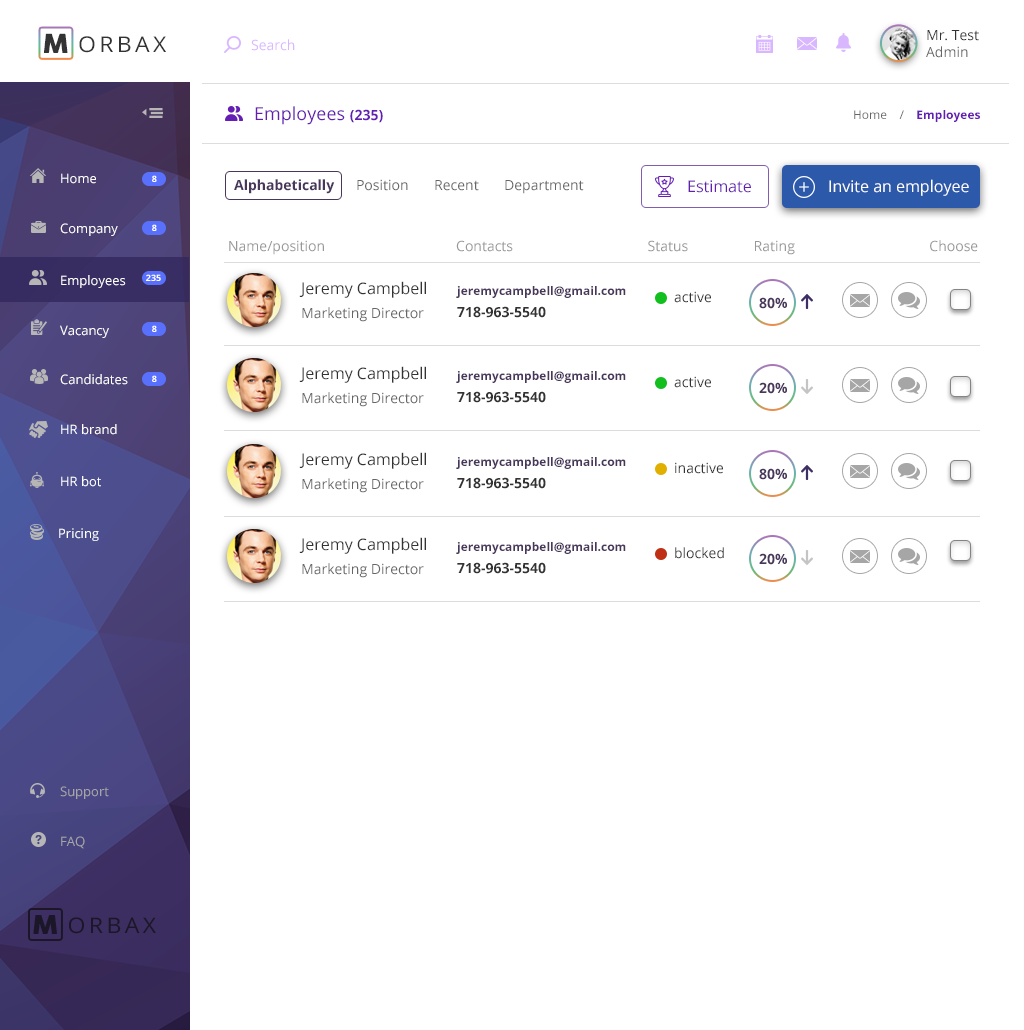
<style>
.page{position:relative;width:1024px;height:1030px;background:#ffffff}
.page>*{position:absolute;margin:0}
.t1{font:14px "OpenSans";color:#333333}
.t2{font:14px "OpenSans";color:#666666}
.t3{font:26.1px "COCOGOOSE";letter-spacing:0.15em;color:#333333;text-transform:uppercase;scale:1.05 1}
.t4{font:21.8px "OpenSans";letter-spacing:0.15em;color:#333333;text-transform:uppercase;scale:1.05 1}
.t5{font:14px "OpenSans";color:#d9b7ff}
.t6{font:18px "OpenSans";color:#641eb4}
.t7{font:14px "OpenSans-Bold";color:#641eb4}
.t8{font:12px "OpenSans";color:#666666}
.t9{font:12px "OpenSans-Bold";color:#641eb4}
.t10{font:13px "OpenSans";color:#ffffff}
.t11{font:8.8px "OpenSans-Bold";color:#ffffff}
.t12{font:14px "OpenSans-Bold";color:#48365b}
.t13{font:16px "OpenSans";color:#641eb4}
.t14{font:16px "OpenSans";color:#ffffff}
.t15{font:14px "OpenSans";color:#989898}
.t16{font:16px "OpenSans";color:#333333}
.t17{font:12px "OpenSans-Bold";color:#48365b}
.t18{font:14px "OpenSans-Bold";color:#333333}
.t19{font:13px "OpenSans";color:#a6a6a6}
.t20{font:25.8px "COCOGOOSE";letter-spacing:0.15em;color:#1c1728;text-transform:uppercase;scale:1.07 1}
.t21{font:21.5px "OpenSans";letter-spacing:0.15em;color:#1c1728;text-transform:uppercase;scale:1.07 1}
</style>
<div class="page">
<p class="t1" style="left:926px;top:30px;width:53px;height:28px">Mr. Test<br><span class="t2">Admin</span></p>
<p class="t3" style="left:44px;top:33px;width:24px;height:20px">M</p>
<p class="t4" style="left:79px;top:36px;width:87px;height:17px">orbax</p>
<p class="t5" style="left:251px;top:39px;width:44px;height:12px">Search</p>
<p class="t6" style="left:255px;top:106px;width:128px;height:19px">Employees <span class="t7">(235)</span></p>
<p class="t8" style="left:854px;top:110px;width:126px;height:12px">Home    /    <span class="t9">Employees</span></p>
<p class="t10" style="left:61px;top:173px;width:35px;height:11px">Home</p>
<p class="t11" style="left:152px;top:175px;width:5px;height:7px">8</p>
<p class="t2" style="left:234px;top:179px;width:350px;height:15px"><span class="t12">Alphabetically</span>      Position       Recent       Department</p>
<p class="t13" style="left:688px;top:180px;width:63px;height:13px">Estimate</p>
<p class="t14" style="left:829px;top:179px;width:140px;height:17px">Invite an employee</p>
<p class="t10" style="left:60px;top:223px;width:58px;height:13px">Company</p>
<p class="t11" style="left:152px;top:224px;width:5px;height:7px">8</p>
<p class="t15" style="left:229px;top:240px;width:749px;height:15px">Name/position                                    Contacts                                     Status                  Rating                                     Choose</p>
<p class="t10" style="left:61px;top:275px;width:65px;height:13px">Employees</p>
<p class="t11" style="left:146px;top:274px;width:15px;height:7px">235</p>
<p class="t16" style="left:299px;top:281px;width:127px;height:17px">Jeremy Campbell</p>
<p class="t17" style="left:456px;top:286px;width:170px;height:12px">jeremycampbell@gmail.com</p>
<p class="t1" style="left:674px;top:291px;width:37px;height:12px">active</p>
<p class="t12" style="left:759px;top:297px;width:28px;height:12px">80%</p>
<p class="t2" style="left:302px;top:307px;width:122px;height:15px">Marketing Director</p>
<p class="t18" style="left:457px;top:306px;width:89px;height:12px">718-963-5540</p>
<p class="t10" style="left:60px;top:325px;width:49px;height:13px">Vacancy</p>
<p class="t11" style="left:152px;top:325px;width:5px;height:7px">8</p>
<p class="t16" style="left:299px;top:366px;width:127px;height:17px">Jeremy Campbell</p>
<p class="t10" style="left:60px;top:374px;width:68px;height:11px">Candidates</p>
<p class="t11" style="left:152px;top:375px;width:5px;height:7px">8</p>
<p class="t17" style="left:456px;top:371px;width:170px;height:12px">jeremycampbell@gmail.com</p>
<p class="t1" style="left:674px;top:376px;width:37px;height:12px">active</p>
<p class="t12" style="left:759px;top:382px;width:28px;height:12px">20%</p>
<p class="t2" style="left:302px;top:392px;width:122px;height:15px">Marketing Director</p>
<p class="t18" style="left:457px;top:391px;width:89px;height:12px">718-963-5540</p>
<p class="t10" style="left:61px;top:424px;width:56px;height:11px">HR brand</p>
<p class="t16" style="left:299px;top:452px;width:127px;height:17px">Jeremy Campbell</p>
<p class="t17" style="left:456px;top:457px;width:170px;height:12px">jeremycampbell@gmail.com</p>
<p class="t1" style="left:675px;top:462px;width:48px;height:12px">inactive</p>
<p class="t12" style="left:759px;top:468px;width:28px;height:12px">80%</p>
<p class="t10" style="left:61px;top:476px;width:40px;height:11px">HR bot</p>
<p class="t2" style="left:302px;top:478px;width:122px;height:15px">Marketing Director</p>
<p class="t18" style="left:457px;top:477px;width:89px;height:12px">718-963-5540</p>
<p class="t10" style="left:59px;top:528px;width:40px;height:13px">Pricing</p>
<p class="t16" style="left:299px;top:537px;width:127px;height:17px">Jeremy Campbell</p>
<p class="t17" style="left:456px;top:542px;width:170px;height:12px">jeremycampbell@gmail.com</p>
<p class="t1" style="left:675px;top:547px;width:49px;height:12px">blocked</p>
<p class="t12" style="left:759px;top:553px;width:28px;height:12px">20%</p>
<p class="t2" style="left:302px;top:563px;width:122px;height:15px">Marketing Director</p>
<p class="t18" style="left:457px;top:562px;width:89px;height:12px">718-963-5540</p>
<p class="t19" style="left:60px;top:786px;width:49px;height:13px">Support</p>
<p class="t19" style="left:61px;top:836px;width:24px;height:13px">FAQ</p>
<p class="t20" style="left:33px;top:915px;width:24px;height:19px">M</p>
<p class="t21" style="left:69px;top:917px;width:87px;height:17px">orbax</p>
</div>
